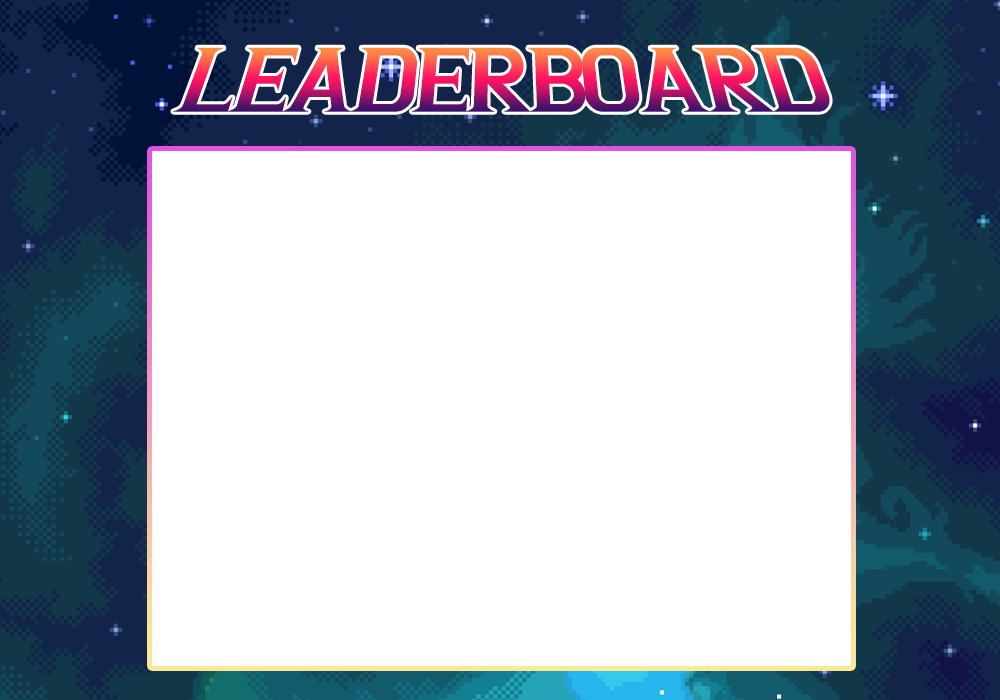
<style>
.page{position:relative;width:1000px;height:700px;background:#ffffff}
.page>*{position:absolute;margin:0}
.t1{font:89.7px "Argentina";letter-spacing:-0.04em}
</style>
<div class="page">
<p class="t1" style="left:173px;top:47px;width:657px;height:65px">LEADERBOARD</p>
</div>
